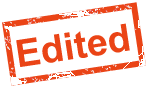
<style>
.page{position:relative;width:148px;height:88px;background:#ffffff}
.page>*{position:absolute;margin:0}
.t1{font:38px "Arial-BoldMT";color:#ea4416}
</style>
<div class="page">
<p class="t1" style="left:13px;top:18px;width:121px;height:64px;rotate:-9deg">Edited</p>
</div>
